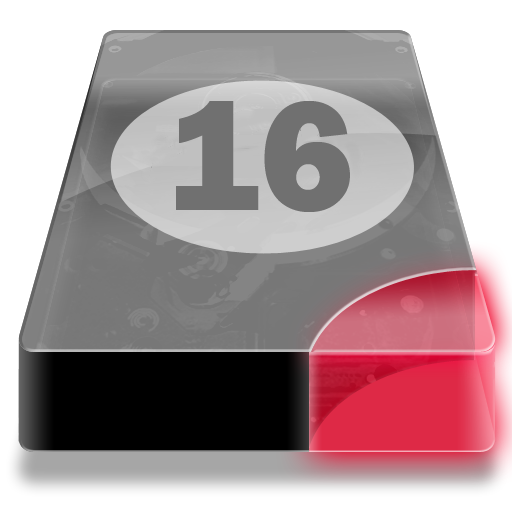
<style>
.page{position:relative;width:512px;height:512px;background:#ffffff}
.page>*{position:absolute;margin:0}
.t1{font:160px "FranklinGothic-Heavy";color:#707070}
</style>
<div class="page">
<p class="t1" style="left:176px;top:101px;width:174px;height:111px">16</p>
</div>
